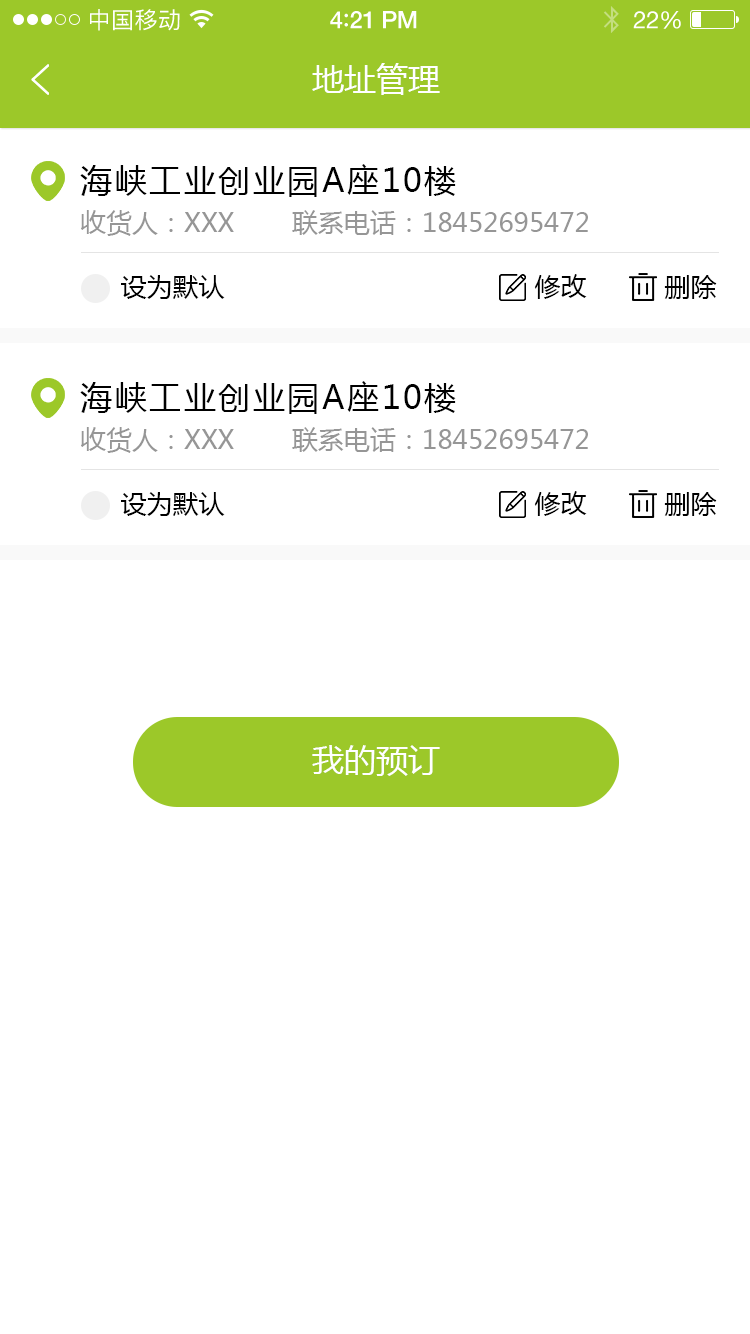
<style>
.page{position:relative;width:750px;height:1334px;background:#ffffff}
.page>*{position:absolute;margin:0}
.t1{font:23px "PingFangSC-Regular";letter-spacing:0.02em;color:#ffffff}
.t2{font:24px "HelveticaNeue-Medium";letter-spacing:-0.02em;color:#ffffff}
.t3{font:26px "Avenir-Medium";letter-spacing:-0.02em;color:#ffffff}
.t4{font:24px "HelveticaNeue";letter-spacing:-0.02em;color:#ffffff}
.t5{font:32px "MicrosoftYaHei";color:#ffffff;text-transform:uppercase}
.t6{font:32px "MicrosoftYaHei";letter-spacing:0.08em;color:#000000;text-transform:uppercase}
.t7{font:26px "MicrosoftYaHei";color:#969696;text-transform:uppercase}
.t8{font:26px "MicrosoftYaHei";color:#000000;text-transform:uppercase}
</style>
<div class="page">
<p class="t1" style="left:90px;top:9px;width:90px;height:22px">中国移动</p>
<p class="t2" style="left:330px;top:11px;width:87px;height:18px">4<span class="t3">:</span>21 PM</p>
<p class="t4" style="left:633px;top:11px;width:48px;height:18px">22%</p>
<p class="t5" style="left:312px;top:63px;width:128px;height:32px">地址管理</p>
<p class="t6" style="left:80px;top:164px;width:376px;height:33px">海峡工业创业园A座10楼</p>
<p class="t7" style="left:81px;top:210px;width:153px;height:26px">收货人：xxx</p>
<p class="t7" style="left:292px;top:210px;width:296px;height:25px">联系电话：18452695472</p>
<p class="t8" style="left:121px;top:275px;width:104px;height:24px">设为默认</p>
<p class="t8" style="left:534px;top:274px;width:53px;height:25px">修改</p>
<p class="t8" style="left:664px;top:275px;width:53px;height:24px">删除</p>
<p class="t6" style="left:80px;top:381px;width:376px;height:33px">海峡工业创业园A座10楼</p>
<p class="t7" style="left:81px;top:427px;width:153px;height:26px">收货人：xxx</p>
<p class="t7" style="left:292px;top:427px;width:296px;height:25px">联系电话：18452695472</p>
<p class="t8" style="left:121px;top:492px;width:104px;height:24px">设为默认</p>
<p class="t8" style="left:534px;top:491px;width:53px;height:25px">修改</p>
<p class="t8" style="left:664px;top:492px;width:53px;height:24px">删除</p>
<p class="t5" style="left:312px;top:745px;width:128px;height:31px">我的预订</p>
</div>
